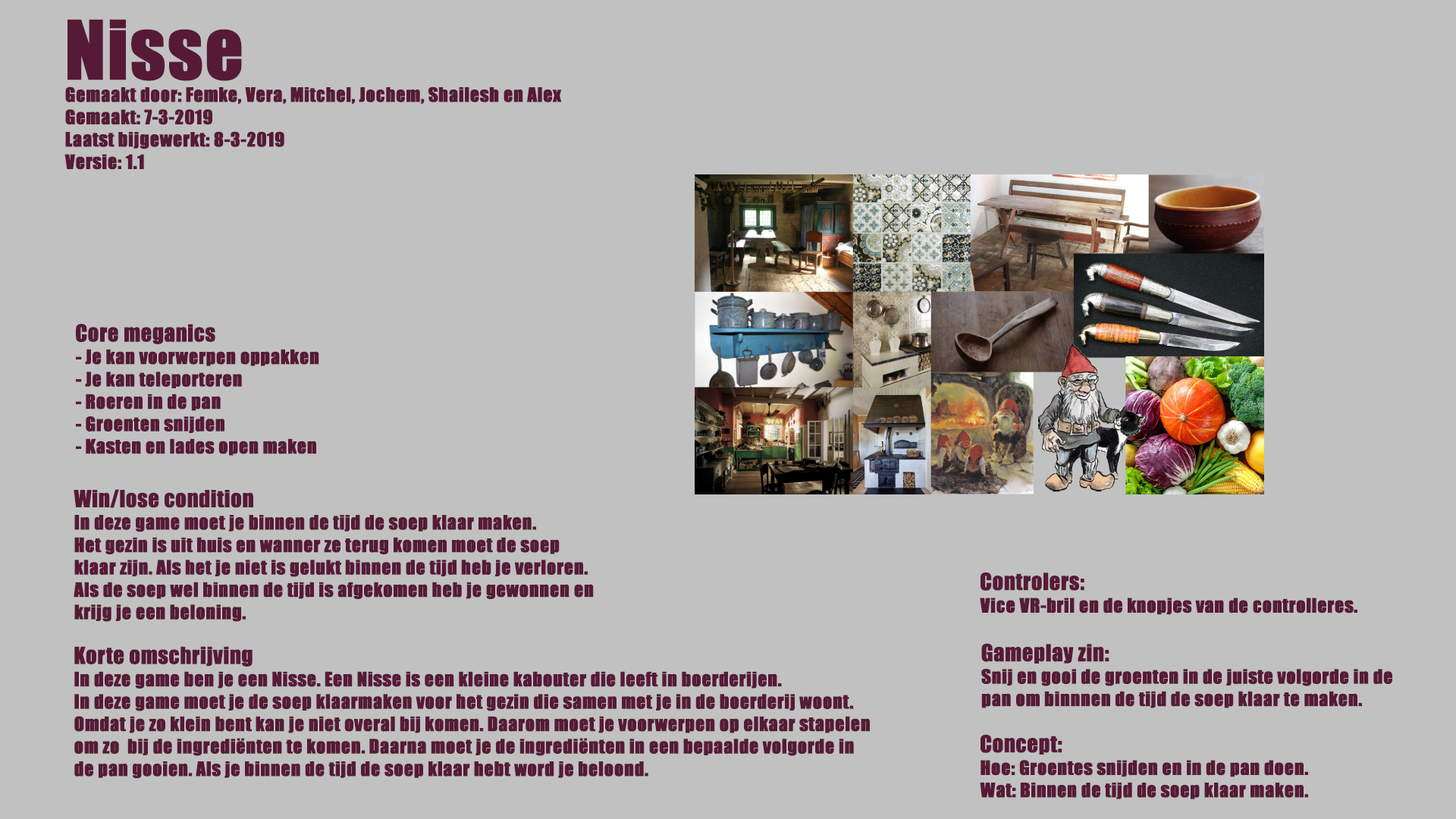
<style>
.page{position:relative;width:1456px;height:819px;background:#c1c1c1}
.page>*{position:absolute;margin:0}
.t1{font:18.7px "Impact";color:#561a37;font-weight:bold}
.t2{font:75.2px "Impact";color:#561a37;font-weight:bold}
.t3{font:21.5px "Impact";color:#561a37;font-weight:bold}
</style>
<div class="page">
<p class="t1" style="left:64px;top:19px;width:498px;height:151px"><span class="t2">Nisse<br></span>Gemaakt door: Femke, Vera, Mitchel, Jochem, Shailesh en Alex<br>Gemaakt: 7-3-2019<br>Laatst bijgewerkt: 8-3-2019<br>Versie: 1.1</p>
<p class="t1" style="left:76px;top:324px;width:243px;height:132px"><span class="t3">Core meganics<br></span>- Je kan voorwerpen oppakken<br>- Je kan teleporteren<br>- Roeren in de pan<br>- Groenten snijden<br>- Kasten en lades open maken</p>
<p class="t1" style="left:74px;top:489px;width:520px;height:133px"><span class="t3">Win/lose condition<br></span>In deze game moet je binnen de tijd de soep klaar maken. <br>Het gezin is uit huis en wanner ze terug komen moet de soep <br>klaar zijn. Als het je niet is gelukt binnen de tijd heb je verloren.<br>Als de soep wel binnen de tijd is afgekomen heb je gewonnen en <br>krijg je een beloning.</p>
<p class="t1" style="left:980px;top:572px;width:377px;height:43px"><span class="t3">Controlers:<br></span>Vice VR-bril en de knopjes van de controlleres.</p>
<p class="t1" style="left:74px;top:646px;width:796px;height:133px"><span class="t3">Korte omschrijving  <br></span>In deze game ben je een Nisse. Een Nisse is een kleine kabouter die leeft in boerderijen.  <br>In deze game moet je de soep klaarmaken voor het gezin die samen met je in de boerderij woont.  <br>Omdat je zo klein bent kan je niet overal bij komen. Daarom moet je voorwerpen op elkaar stapelen <br>om zo  bij de ingrediënten te komen. Daarna moet je de ingrediënten in een bepaalde volgorde in <br>de pan gooien. Als je binnen de tijd de soep klaar hebt word je beloond.</p>
<p class="t1" style="left:981px;top:643px;width:411px;height:65px"><span class="t3">Gameplay zin:<br></span>Snij en gooi de groenten in de juiste volgorde in de <br>pan om binnnen de tijd de soep klaar te maken.</p>
<p class="t1" style="left:980px;top:734px;width:328px;height:65px"><span class="t3">Concept:<br></span>Hoe: Groentes snijden en in de pan doen.<br>Wat: Binnen de tijd de soep klaar maken.</p>
</div>
